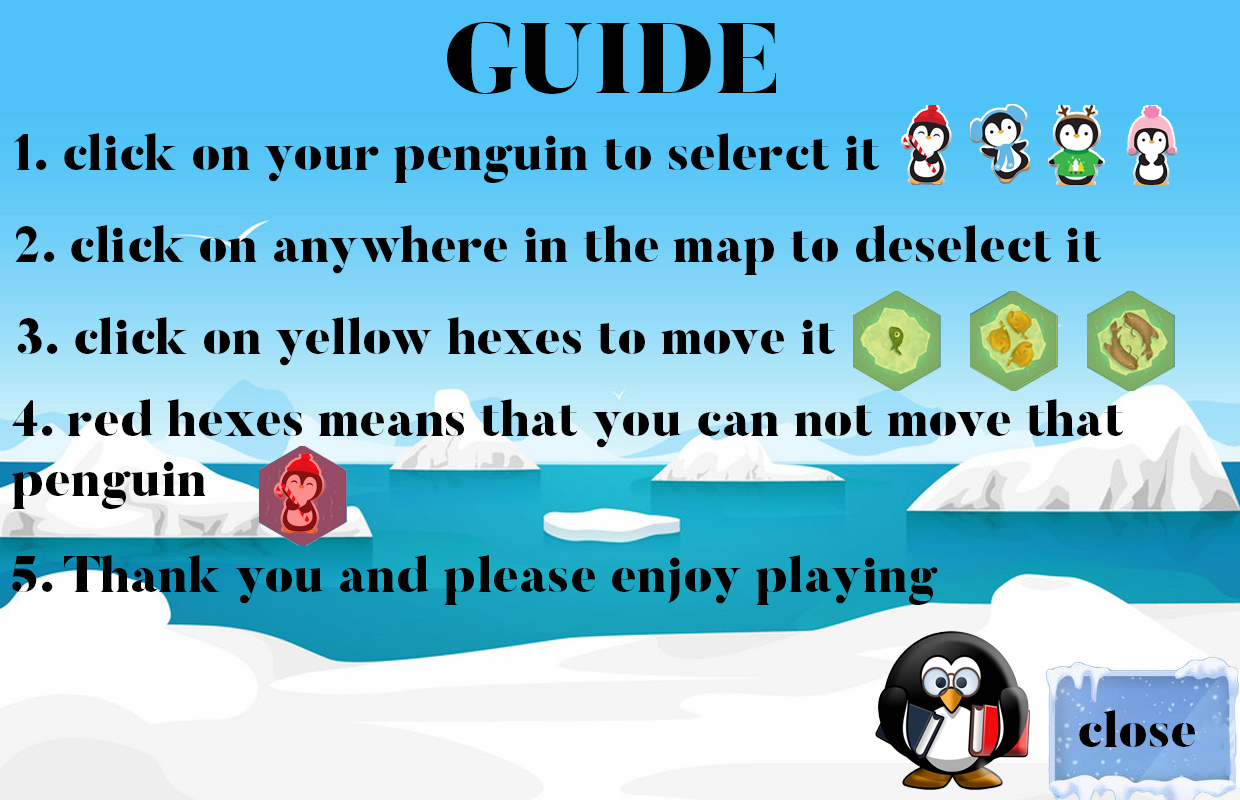
<style>
.page{position:relative;width:1240px;height:800px}
.page>*{position:absolute;margin:0}
.t1{font:100px "Butler-Black";color:#000000}
.t2{font:50px "Butler-Black";color:#000000}
</style>
<div class="page">
<p class="t1" style="left:447px;top:22px;width:329px;height:72px">GUIDE</p>
<p class="t2" style="left:14px;top:133px;width:866px;height:50px">1. click on your penguin to selerct it</p>
<p class="t2" style="left:15px;top:225px;width:1087px;height:50px">2. click on anywhere in the map to deselect it</p>
<p class="t2" style="left:17px;top:317px;width:819px;height:49px">3. click on yellow hexes to move it</p>
<p class="t2" style="left:12px;top:399px;width:1112px;height:110px">4. red hexes means that you can not move that <br>penguin</p>
<p class="t2" style="left:12px;top:555px;width:926px;height:50px">5. Thank you and please enjoy playing</p>
<p class="t2" style="left:1079px;top:710px;width:116px;height:37px">close</p>
</div>
